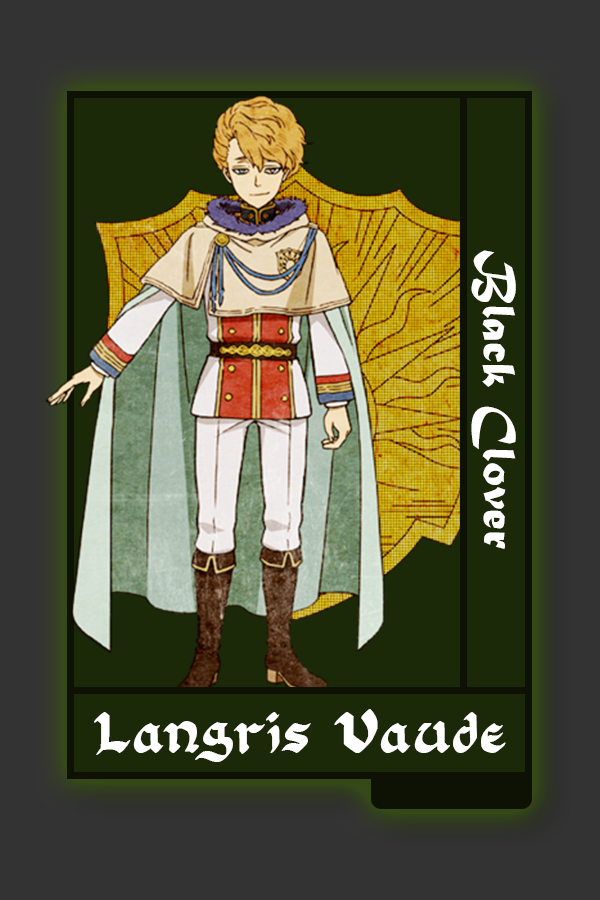
<style>
.page{position:relative;width:600px;height:900px;background:#333333}
.page>*{position:absolute;margin:0}
.t1{font:48.8px "MaturaMTScriptCapitals";color:#ffffff}
.t2{font:49.8px "FloranteatLaura";color:#ffffff}
</style>
<div class="page">
<p class="t1" style="left:471px;top:250px;width:45px;height:299px;rotate:90deg">Black Clover</p>
<p class="t2" style="left:94px;top:709px;width:412px;height:53px">Langris Vaude</p>
</div>
